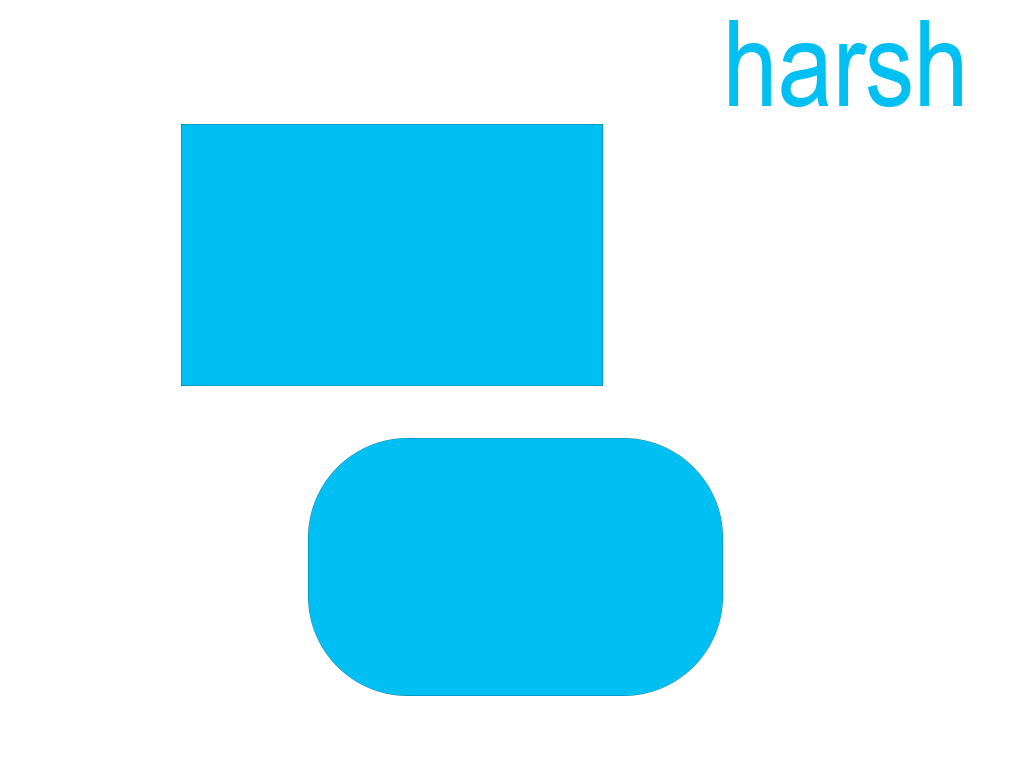
<style>
.page{position:relative;width:1024px;height:768px;background:#ffffff}
.page>*{position:absolute;margin:0}
.t1{font:120px "ArialNarrow";color:#00bff3}
</style>
<div class="page">
<p class="t1" style="left:729px;top:20px;width:233px;height:87px">harsh</p>
</div>
